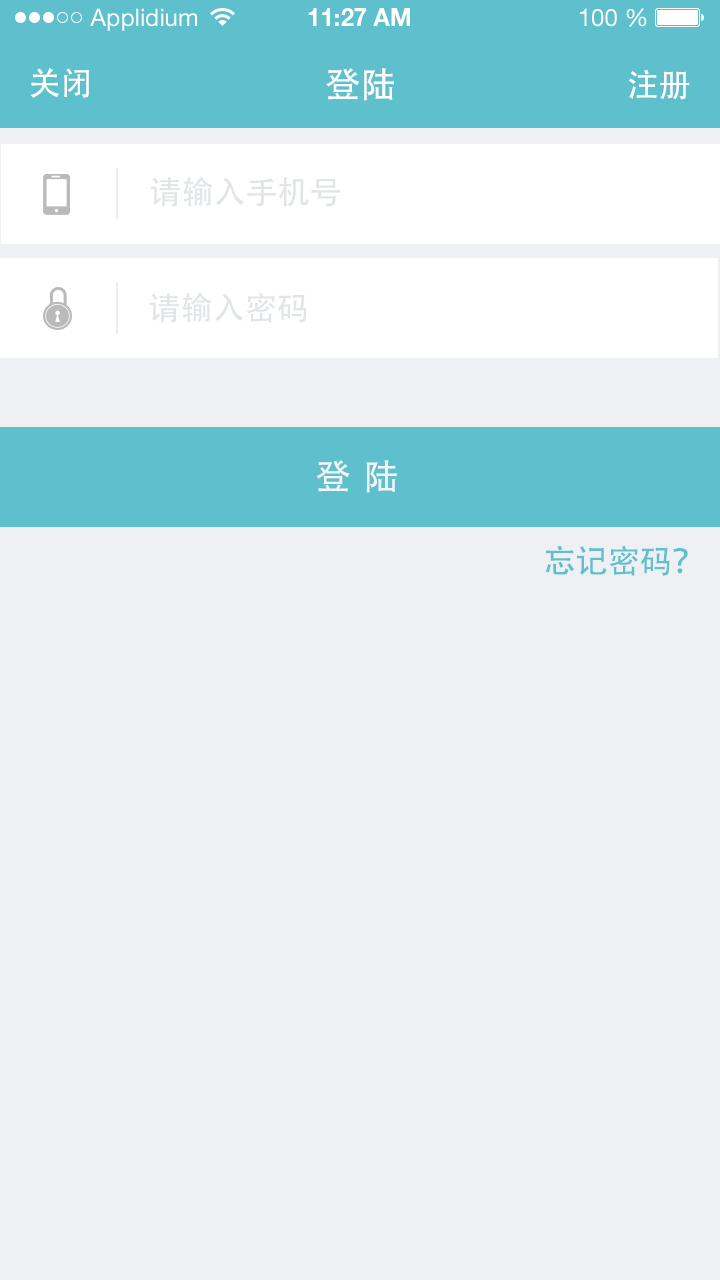
<style>
.page{position:relative;width:720px;height:1280px;background:#eff0f4}
.page>*{position:absolute;margin:0}
.t1{font:32px "AdobeHeitiStd-Regular";color:#ffffff}
.t2{font:36px "AdobeHeitiStd-Regular";color:#ffffff}
.t3{font:32px "AdobeHeitiStd-Regular";color:#e1e5e7}
.t4{font:36px "AdobeHeitiStd-Regular";letter-spacing:-0.08em;color:#f3f4f6}
.t5{font:32px "AdobeHeitiStd-Regular";color:#5fc0cd}
</style>
<div class="page">
<p class="t1" style="left:30px;top:68px;width:59px;height:30px">关闭</p>
<p class="t2" style="left:326px;top:68px;width:68px;height:33px">登陆</p>
<p class="t1" style="left:628px;top:69px;width:62px;height:31px">注册</p>
<p class="t3" style="left:150px;top:177px;width:191px;height:30px">请输入手机号</p>
<p class="t3" style="left:149px;top:293px;width:158px;height:30px">请输入密码</p>
<p class="t4" style="left:316px;top:460px;width:81px;height:33px">登   陆</p>
<p class="t5" style="left:545px;top:545px;width:143px;height:31px">忘记密码？</p>
</div>
